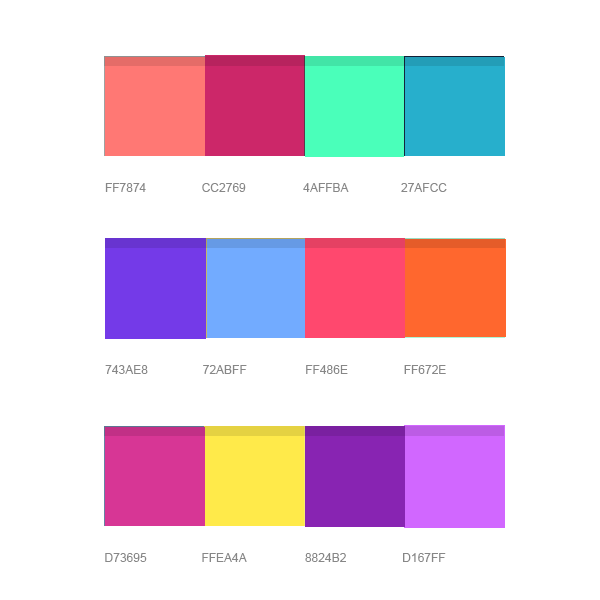
<style>
.page{position:relative;width:600px;height:600px;background:#ffffff}
.page>*{position:absolute;margin:0}
.t1{font:12px "ArialMT";color:#878787;text-transform:uppercase}
</style>
<div class="page">
<p class="t1" style="left:105px;top:183px;width:41px;height:9px">FF7874</p>
<p class="t1" style="left:202px;top:183px;width:44px;height:9px">CC2769</p>
<p class="t1" style="left:303px;top:183px;width:46px;height:9px">4AFFBA</p>
<p class="t1" style="left:401px;top:183px;width:46px;height:9px">27afcc</p>
<p class="t1" style="left:105px;top:365px;width:43px;height:9px">743ae8</p>
<p class="t1" style="left:203px;top:365px;width:44px;height:9px">72abff</p>
<p class="t1" style="left:306px;top:365px;width:42px;height:9px">FF486E</p>
<p class="t1" style="left:404px;top:365px;width:42px;height:9px">ff672e</p>
<p class="t1" style="left:105px;top:553px;width:42px;height:9px">d73695</p>
<p class="t1" style="left:202px;top:553px;width:45px;height:9px">ffea4a</p>
<p class="t1" style="left:305px;top:553px;width:41px;height:9px">8824b2</p>
<p class="t1" style="left:403px;top:553px;width:43px;height:9px">d167ff</p>
</div>
